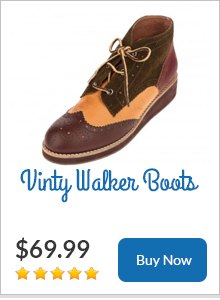
<style>
.page{position:relative;width:220px;height:300px;background:#ffffff}
.page>*{position:absolute;margin:0}
.t1{font:30px "GrandHotel-Regular";letter-spacing:-0.008em;color:#136db1}
.t2{font:24px "Lato-Bold";color:#363636}
</style>
<div class="page">
<p class="t1" style="left:20px;top:168px;width:179px;height:35px">Vinty Walker Boots</p>
<p class="t2" style="left:16px;top:237px;width:74px;height:24px">$69.99</p>
</div>
